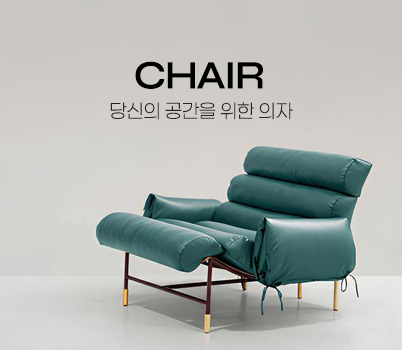
<style>
.page{position:relative;width:402px;height:350px}
.page>*{position:absolute;margin:0}
.t1{font:40.2px "Syne-SemiBold";letter-spacing:-0.04em;color:#000000}
.t2{font:19.4px "Paperlogy-2ExtraLight";color:#242424}
</style>
<div class="page">
<p class="t1" style="left:135px;top:61px;width:128px;height:28px">CHAIR</p>
<p class="t2" style="left:110px;top:102px;width:183px;height:18px">당신의 공간을 위한 의자</p>
</div>
